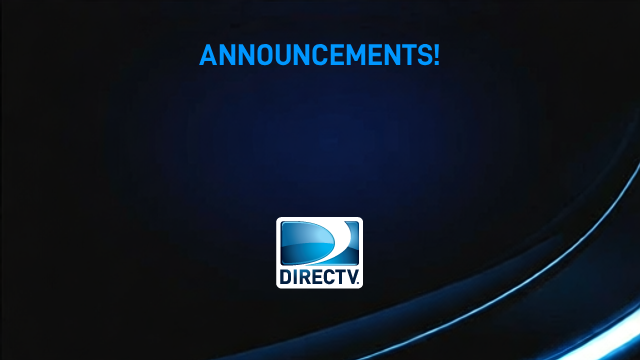
<style>
.page{position:relative;width:640px;height:360px}
.page>*{position:absolute;margin:0}
.t1{font:30px "D-DIN-Bold";color:#0097ff}
</style>
<div class="page">
<p class="t1" style="left:199px;top:43px;width:240px;height:23px">ANNOUNCEMENTS!</p>
</div>
